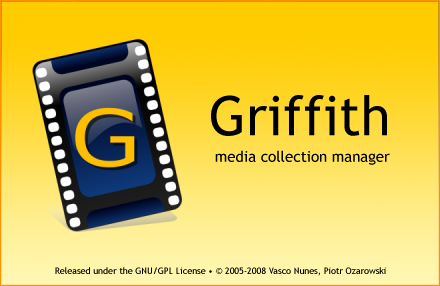
<style>
.page{position:relative;width:440px;height:286px}
.page>*{position:absolute;margin:0}
.t1{font:54.8px "TrebuchetMS";color:#000000}
.t2{font:15px "TrebuchetMS";color:#000000}
.t3{font:9px "TrebuchetMS";color:#000000}
</style>
<div class="page">
<p class="t1" style="left:211px;top:95px;width:176px;height:41px">Griffith</p>
<p class="t2" style="left:215px;top:150px;width:175px;height:15px">media collection manager</p>
<p class="t3" style="left:55px;top:267px;width:331px;height:9px">Released under the GNU/GPL License • © 2005-2008 Vasco Nunes, Piotr Ozarowski</p>
</div>
